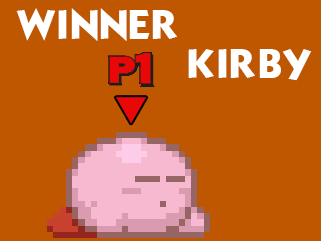
<style>
.page{position:relative;width:321px;height:241px;background:#bf5700}
.page>*{position:absolute;margin:0}
.t1{font:36px "KabelBd-Normal";color:#ffffff}
</style>
<div class="page">
<p class="t1" style="left:16px;top:8px;width:161px;height:33px">WINNER</p>
<p class="t1" style="left:188px;top:49px;width:124px;height:32px">KIRBY</p>
</div>
